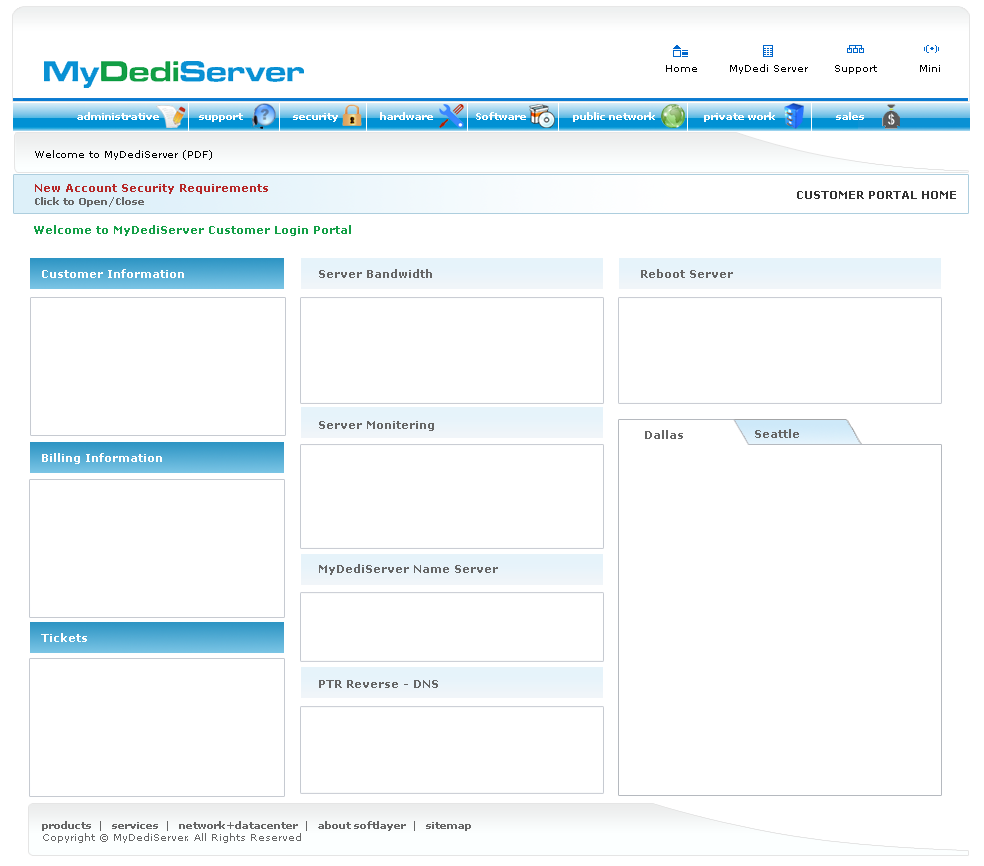
<style>
.page{position:relative;width:984px;height:866px;background:#ffffff}
.page>*{position:absolute;margin:0}
.t1{font:10px "Verdana";color:#000000}
.t2{font:10px "Verdana-Bold";color:#ffffff}
.t3{font:11px "Verdana-Bold";color:#b62727}
.t4{font:10px "Verdana-Bold";color:#666666}
.t5{font:11px "Verdana-Bold";color:#333333}
.t6{font:11px "Verdana-Bold";color:#139f46}
.t7{font:11px "Verdana-Bold";color:#ffffff}
.t8{font:11px "Verdana-Bold";color:#666666}
.t9{font:10px "Verdana";color:#666666}
</style>
<div class="page">
<p class="t1" style="left:666px;top:65px;width:31px;height:7px">Home</p>
<p class="t1" style="left:730px;top:64px;width:78px;height:10px">MyDedi Server</p>
<p class="t1" style="left:835px;top:65px;width:42px;height:9px">Support</p>
<p class="t1" style="left:920px;top:65px;width:20px;height:7px">Mini</p>
<p class="t2" style="left:77px;top:112px;width:82px;height:8px">administrative</p>
<p class="t2" style="left:199px;top:113px;width:44px;height:9px">support</p>
<p class="t2" style="left:293px;top:113px;width:45px;height:9px">security</p>
<p class="t2" style="left:380px;top:112px;width:53px;height:8px">hardware</p>
<p class="t2" style="left:476px;top:112px;width:50px;height:8px">Software</p>
<p class="t2" style="left:573px;top:112px;width:82px;height:10px">public network</p>
<p class="t2" style="left:704px;top:112px;width:71px;height:10px">private work</p>
<p class="t2" style="left:836px;top:112px;width:28px;height:8px">sales</p>
<p class="t1" style="left:35px;top:150px;width:177px;height:10px">Welcome to MyDediServer (PDF)</p>
<p class="t3" style="left:35px;top:184px;width:233px;height:10px">New Account Security Requirements</p>
<p class="t4" style="left:35px;top:197px;width:109px;height:10px">Click to Open/Close</p>
<p class="t5" style="left:797px;top:191px;width:159px;height:8px">CUSTOMER PORTAL HOME</p>
<p class="t6" style="left:34px;top:225px;width:317px;height:11px">Welcome to MyDediServer Customer Login Portal</p>
<p class="t7" style="left:42px;top:269px;width:142px;height:9px">Customer Information</p>
<p class="t8" style="left:319px;top:269px;width:113px;height:9px">Server Bandwidth</p>
<p class="t8" style="left:641px;top:269px;width:92px;height:9px">Reboot Server</p>
<p class="t8" style="left:319px;top:421px;width:115px;height:10px">Server Monitering</p>
<p class="t8" style="left:645px;top:430px;width:38px;height:9px">Dallas</p>
<p class="t8" style="left:755px;top:429px;width:44px;height:9px">Seattle</p>
<p class="t7" style="left:42px;top:453px;width:120px;height:11px">Billing Information</p>
<p class="t8" style="left:319px;top:564px;width:179px;height:11px">MyDediServer Name Server</p>
<p class="t7" style="left:41px;top:633px;width:46px;height:9px">Tickets</p>
<p class="t8" style="left:319px;top:680px;width:119px;height:8px">PTR Reverse - DNS</p>
<p class="t4" style="left:42px;top:821px;width:429px;height:22px">products  |   services  |   network+datacenter  |   about softlayer  |   sitemap<br><span class="t9">Copyright © MyDediServer. All Rights Reserved</span></p>
</div>
